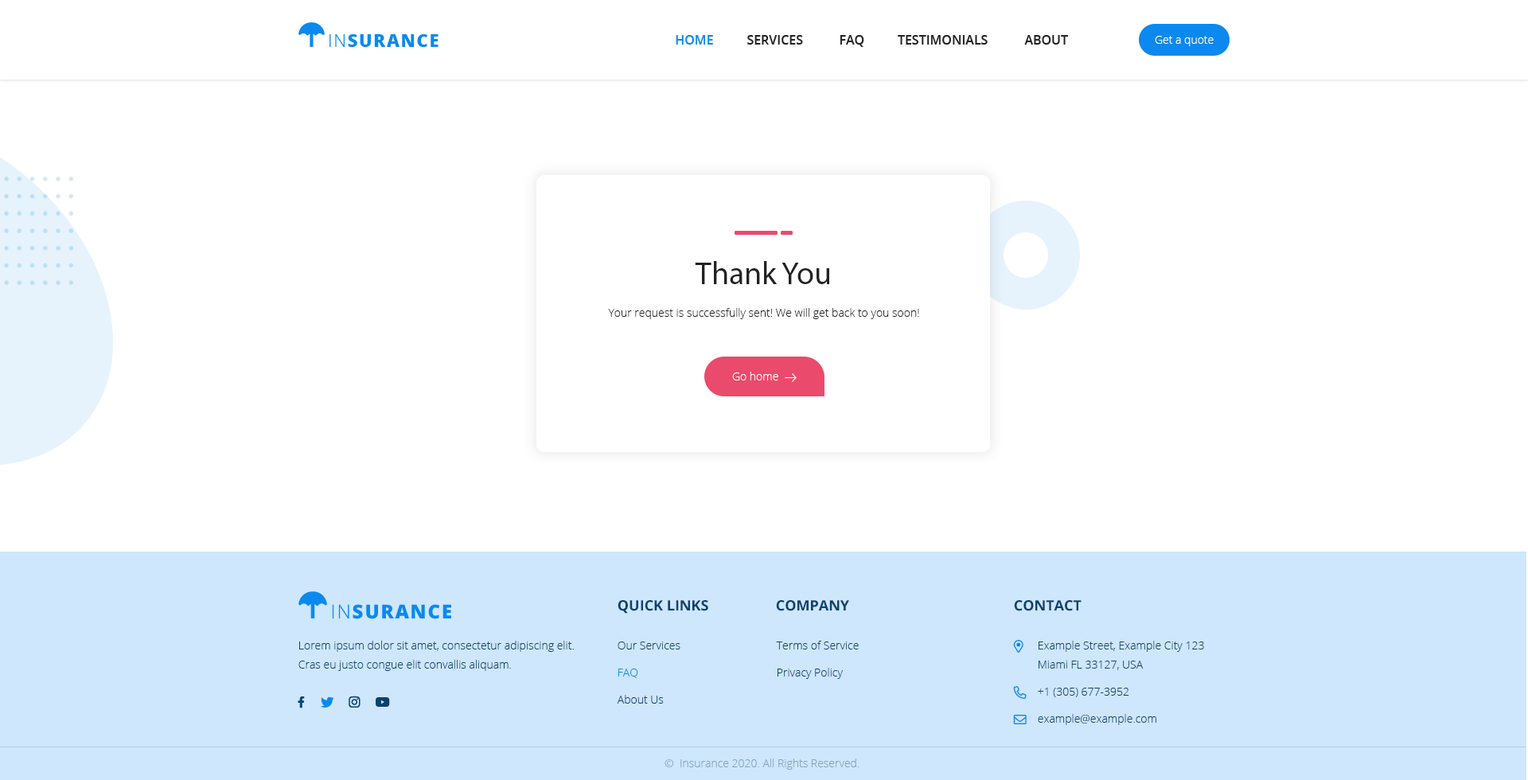
<style>
.page{position:relative;width:1528px;height:780px;background:#ffffff}
.page>*{position:absolute;margin:0}
.t1{font:17.5px "OpenSans-Extrabold";letter-spacing:0.075em;color:#0b89ee;text-transform:uppercase}
.t2{font:17.5px "OpenSans-Light";letter-spacing:0.075em;color:#0b89ee;text-transform:uppercase}
.t3{font:12.7px "OpenSans-Semibold";color:#0b89ee;text-transform:uppercase}
.t4{font:12.7px "OpenSans-Semibold";color:#232323;text-transform:uppercase}
.t5{font:12.7px "OpenSans-Semibold";color:#232323}
.t6{font:11.1px "OpenSans-Light";color:#ffffff}
.t7{font:31.6px "MyriadPro-Regular";color:#222222}
.t8{font:11.1px "OpenSans-Light";color:#222222}
.t9{font:19.2px "OpenSans-Extrabold";letter-spacing:0.075em;color:#0b89ee;text-transform:uppercase}
.t10{font:19.2px "OpenSans-Light";letter-spacing:0.075em;color:#0b89ee;text-transform:uppercase}
.t11{font:14.3px "OpenSans-Bold";color:#0a426f;text-transform:uppercase}
.t12{font:11.1px/19.1px "OpenSans-Light";color:#0a426f}
.t13{font:11.1px/19.1px "OpenSans-Light";color:#0b89ee}
.t14{font:11.1px "OpenSans-Light";color:#85a2bd}
</style>
<div class="page">
<p class="t1" style="left:330px;top:34px;width:109px;height:13px"><span class="t2">In</span>surance</p>
<p class="t3" style="left:676px;top:35px;width:37px;height:10px">Home</p>
<p class="t4" style="left:748px;top:35px;width:55px;height:10px">Services</p>
<p class="t5" style="left:840px;top:35px;width:25px;height:12px">FAQ</p>
<p class="t4" style="left:898px;top:35px;width:90px;height:10px">Testimonials</p>
<p class="t4" style="left:1025px;top:35px;width:43px;height:10px">About</p>
<p class="t6" style="left:1155px;top:36px;width:59px;height:10px">Get a quote</p>
<p class="t7" style="left:695px;top:261px;width:135px;height:23px">Thank You</p>
<p class="t8" style="left:608px;top:308px;width:311px;height:11px">Your request is successfully sent! We will get back to you soon!</p>
<p class="t6" style="left:732px;top:372px;width:47px;height:9px">Go home</p>
<p class="t9" style="left:332px;top:604px;width:119px;height:15px"><span class="t10">In</span>surance</p>
<p class="t11" style="left:618px;top:600px;width:91px;height:14px">Quick Links</p>
<p class="t11" style="left:776px;top:600px;width:73px;height:11px">Company</p>
<p class="t11" style="left:1014px;top:600px;width:68px;height:11px">CONTACT</p>
<p class="t12" style="left:299px;top:641px;width:275px;height:30px">Lorem ipsum dolor sit amet, consectetur adipiscing elit. Cras eu justo congue elit convallis aliquam.</p>
<p class="t12" style="left:617px;top:642px;width:64px;height:62px">Our Services<br><span class="t13">FAQ<br></span>About Us</p>
<p class="t12" style="left:776px;top:641px;width:83px;height:38px">Terms of Service<br>Privacy Policy</p>
<p class="t12" style="left:1038px;top:641px;width:166px;height:84px">Example Street, Example City 123<br>Miami FL 33127, USA<br>+1 (305) 677-3952<br>example@example.com</p>
<p class="t14" style="left:665px;top:759px;width:195px;height:11px">©  Insurance 2020. All Rights Reserved.</p>
</div>
